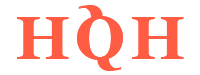
<style>
.page{position:relative;width:200px;height:75px;background:#ffffff}
.page>*{position:absolute;margin:0}
.t1{font:61.3px "Georgia-Bold";letter-spacing:0.025em;color:#ff5d43}
</style>
<div class="page">
<p class="t1" style="left:77px;top:5px;width:46px;height:55px;rotate:180deg">Q</p>
<p class="t1" style="left:17px;top:17px;width:52px;height:42px">H</p>
<p class="t1" style="left:77px;top:16px;width:46px;height:55px">Q</p>
<p class="t1" style="left:132px;top:17px;width:52px;height:42px">H</p>
</div>
